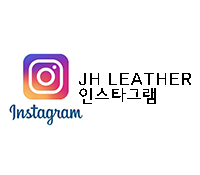
<style>
.page{position:relative;width:200px;height:175px;background:#ffffff}
.page>*{position:absolute;margin:0}
.t1{font:18px/16px "HaanYGodic23";color:#000000}
</style>
<div class="page">
<p class="t1" style="left:79px;top:73px;width:112px;height:31px">JH LEATHER<br>인스타그램</p>
</div>
